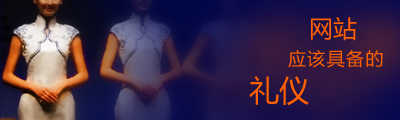
<style>
.page{position:relative;width:400px;height:120px}
.page>*{position:absolute;margin:0}
.t1{font:24px "MicrosoftYaHei";color:#ff6000}
.t2{font:18px "MicrosoftYaHei";letter-spacing:0.075em;color:#ff6000}
.t3{font:30px "MicrosoftYaHei";color:#ff6000}
</style>
<div class="page">
<p class="t1" style="left:311px;top:17px;width:46px;height:24px">网站</p>
<p class="t2" style="left:288px;top:50px;width:95px;height:18px">应该具备的</p>
<p class="t3" style="left:249px;top:76px;width:60px;height:30px">礼仪</p>
</div>
